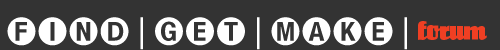
<style>
.page{position:relative;width:500px;height:50px;background:#333333}
.page>*{position:absolute;margin:0}
.t1{font:31.6px "PiOneFiveFiveZero";letter-spacing:-0.01em;color:#ffffff}
.t2{font:23px "EinhornICG";letter-spacing:-0.01em;color:#ef3f23}
</style>
<div class="page">
<p class="t1" style="left:7px;top:17px;width:400px;height:33px">FIND - GET - MAKE -</p>
<p class="t2" style="left:418px;top:21px;width:69px;height:19px">forum</p>
</div>
